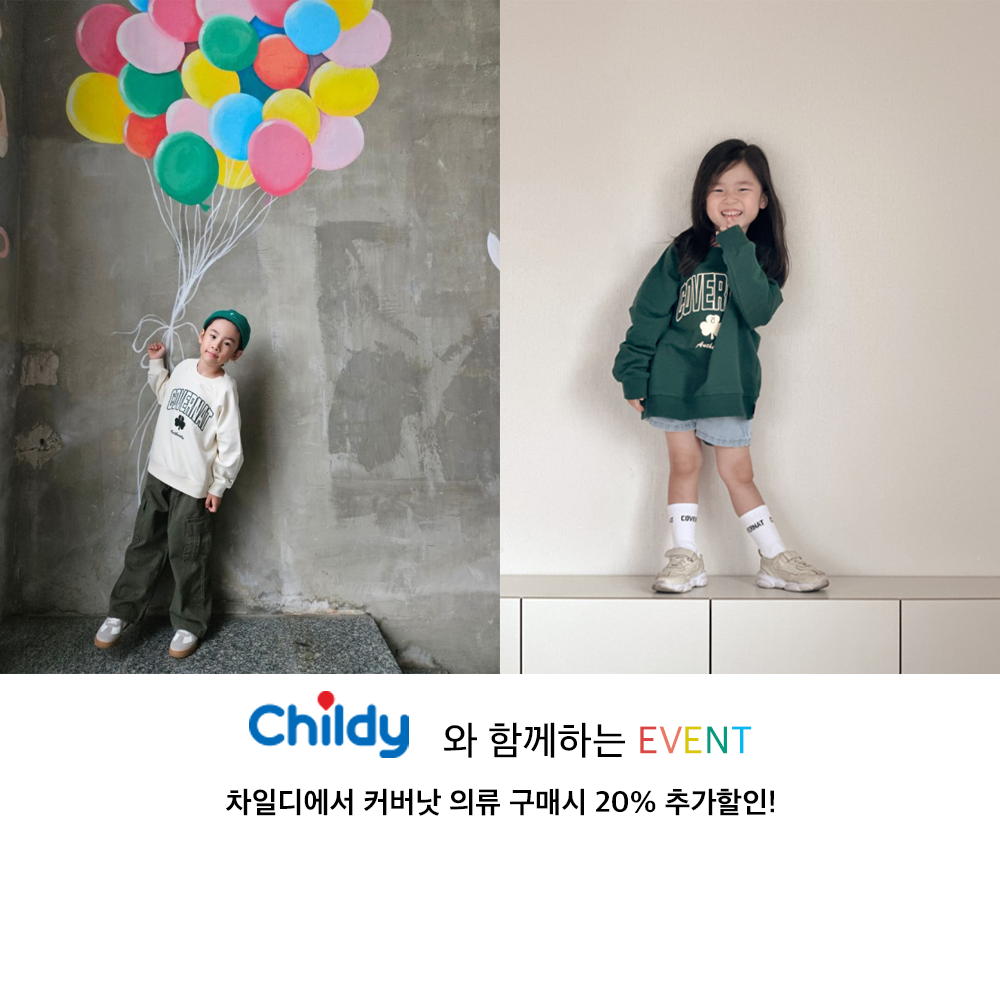
<style>
.page{position:relative;width:1000px;height:1000px;background:#ffffff}
.page>*{position:absolute;margin:0}
.t1{font:40px "AppleSDGothicNeoM00";color:#000000}
.t2{font:40px "AppleSDGothicNeoM00";color:#dc4541}
.t3{font:40px "AppleSDGothicNeoM00";color:#eb7865}
.t4{font:40px "AppleSDGothicNeoM00";color:#d9c902}
.t5{font:40px "AppleSDGothicNeoM00";color:#039c80}
.t6{font:40px "AppleSDGothicNeoM00";color:#04b9f0}
.t7{font:30px "AppleSDGothicNeoB00";color:#000000}
</style>
<div class="page">
<p class="t1" style="left:443px;top:722px;width:309px;height:36px">와 함께하는 <span class="t2">E</span><span class="t3">V</span><span class="t4">E</span><span class="t5">N</span><span class="t6">T</span></p>
<p class="t7" style="left:225px;top:788px;width:549px;height:28px">차일디에서 커버낫 의류 구매시 20% 추가할인!</p>
</div>
